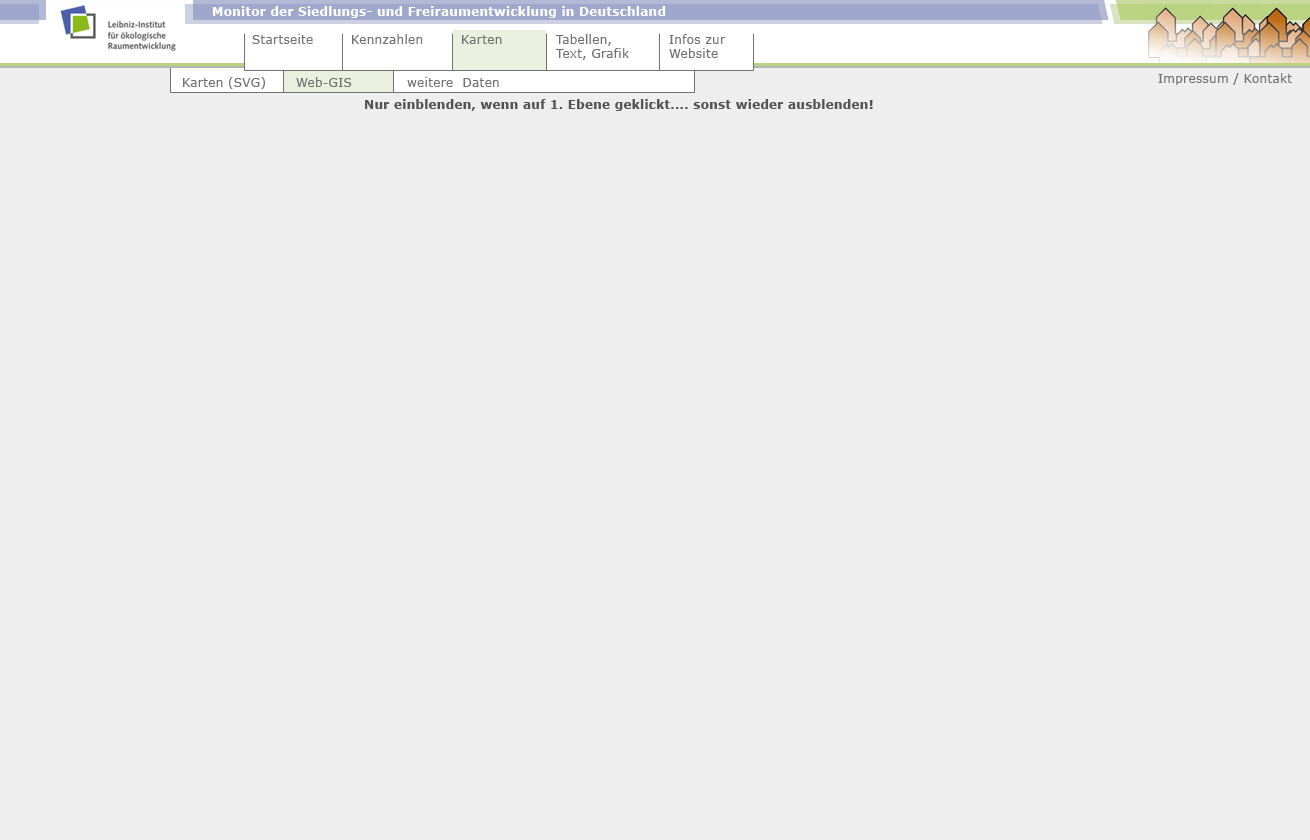
<style>
.page{position:relative;width:1310px;height:840px;background:#eeeeee}
.page>*{position:absolute;margin:0}
.t1{font:12px "Verdana";letter-spacing:0.025em;color:#717171}
.t2{font:12px "Verdana-Bold";letter-spacing:0.025em;color:#535353}
</style>
<div class="page">
<p class="t1" style="left:252px;top:34px;width:61px;height:10px">Startseite</p>
<p class="t1" style="left:352px;top:34px;width:71px;height:10px">Kennzahlen</p>
<p class="t1" style="left:462px;top:35px;width:40px;height:9px">Karten</p>
<p class="t1" style="left:555px;top:34px;width:74px;height:26px">Tabellen, <br>Text, Grafik</p>
<p class="t1" style="left:669px;top:34px;width:57px;height:24px">Infos zur<br>Website</p>
<p class="t1" style="left:183px;top:77px;width:82px;height:12px">Karten (SVG)</p>
<p class="t1" style="left:296px;top:77px;width:56px;height:10px">Web-GIS</p>
<p class="t1" style="left:407px;top:77px;width:92px;height:10px">weitere  Daten</p>
<p class="t1" style="left:1158px;top:73px;width:134px;height:12px">Impressum / Kontakt</p>
<p class="t2" style="left:365px;top:99px;width:508px;height:12px">Nur einblenden, wenn auf 1. Ebene geklickt.... sonst wieder ausblenden!</p>
</div>
